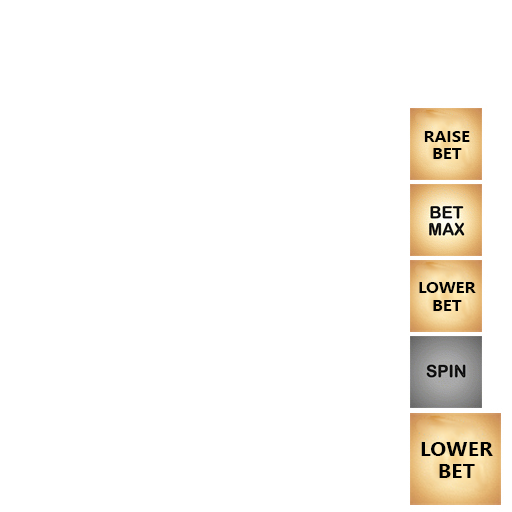
<style>
.page{position:relative;width:512px;height:512px;background:#ffffff}
.page>*{position:absolute;margin:0}
.t1{font:15.6px "NirmalaUI-Bold";color:#000000;scale:1.08 1}
.t2{font:15.4px "NirmalaUI-Bold";color:#000000;scale:1.09 1}
.t3{font:19.8px "NirmalaUI-Bold";color:#000000;scale:1.08 1}
</style>
<div class="page">
<p class="t1" style="left:424px;top:131px;width:46px;height:11px">RAISE</p>
<p class="t1" style="left:433px;top:148px;width:29px;height:11px">BET</p>
<p class="t2" style="left:419px;top:282px;width:57px;height:11px">LOWER</p>
<p class="t2" style="left:433px;top:300px;width:29px;height:11px">BET</p>
<p class="t3" style="left:421px;top:442px;width:72px;height:14px">LOWER</p>
<p class="t3" style="left:439px;top:464px;width:36px;height:14px">BET</p>
</div>
